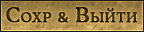
<style>
.page{position:relative;width:144px;height:32px}
.page>*{position:absolute;margin:0}
.t1{font:19.5px "CooperMediumCBT";letter-spacing:0.04em;color:#322511;font-variant:small-caps;font-weight:bold}
.t2{font:19.5px "Corbel";letter-spacing:0.04em;color:#322511;font-variant:small-caps;font-weight:bold}
</style>
<div class="page">
<p class="t1" style="left:6px;top:7px;width:131px;height:16px">Сохр <span class="t2">&amp;</span> Выйти</p>
</div>
